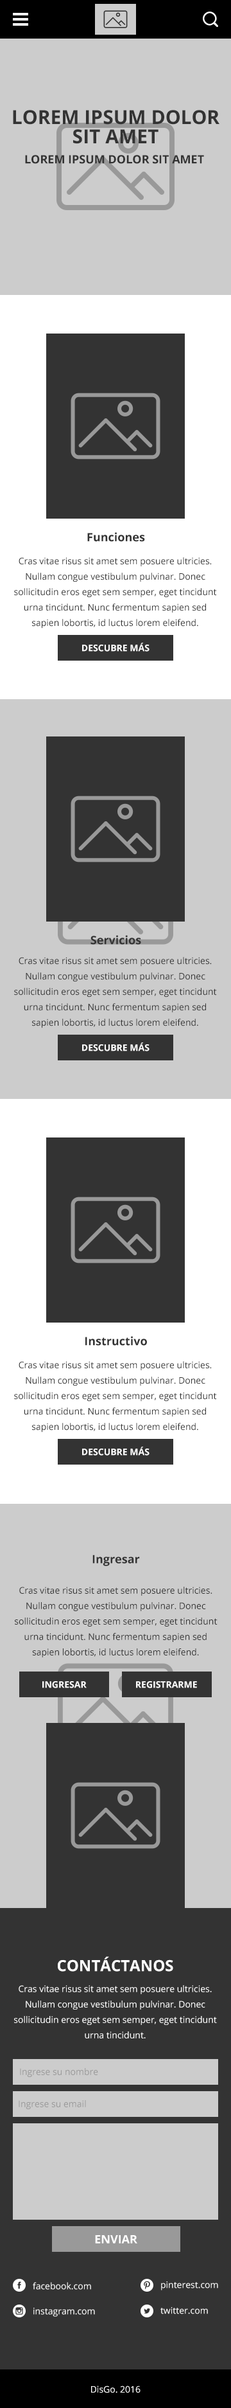
<style>
.page{position:relative;width:231px;height:2408px;background:#cccccc}
.page>*{position:absolute;margin:0}
.t1{font:19.3px/19.3px "OpenSans-Bold";color:#333333;text-transform:uppercase}
.t2{font:11.6px "OpenSans-Bold";color:#333333;text-transform:uppercase}
.t3{font:11.6px "OpenSans-Bold";color:#333333}
.t4{font:9px/15.4px "OpenSans";color:#333333}
.t5{font:9px "OpenSans-Bold";color:#ffffff;text-transform:uppercase}
.t6{font:15.4px "OpenSans-Bold";color:#ffffff}
.t7{font:9px/15.4px "OpenSans";color:#ffffff}
.t8{font:9px "OpenSans";color:#999999}
.t9{font:11.6px "OpenSans-Bold";color:#ffffff;text-transform:uppercase}
.t10{font:9px "OpenSans";color:#ffffff}
</style>
<div class="page">
<p class="t1" style="left:13px;top:110px;width:207px;height:34px;text-align:center">Lorem ipsum dolor sit amet</p>
<p class="t2" style="left:25px;top:155px;width:179px;height:9px">Lorem ipsum dolor sit amet</p>
<p class="t3" style="left:87px;top:532px;width:58px;height:10px">Funciones</p>
<p class="t4" style="left:14px;top:557px;width:203px;height:72px;text-align:center">Cras vitae risus sit amet sem posuere ultricies. Nullam congue vestibulum pulvinar. Donec sollicitudin eros eget sem semper, eget tincidunt urna tincidunt. Nunc fermentum sapien sed sapien lobortis, id luctus lorem eleifend.</p>
<p class="t5" style="left:82px;top:643px;width:68px;height:9px">Descubre más</p>
<p class="t3" style="left:91px;top:935px;width:50px;height:10px">Servicios</p>
<p class="t4" style="left:14px;top:957px;width:203px;height:71px;text-align:center">Cras vitae risus sit amet sem posuere ultricies. Nullam congue vestibulum pulvinar. Donec sollicitudin eros eget sem semper, eget tincidunt urna tincidunt. Nunc fermentum sapien sed sapien lobortis, id luctus lorem eleifend.</p>
<p class="t5" style="left:82px;top:1043px;width:68px;height:9px">Descubre más</p>
<p class="t3" style="left:85px;top:1336px;width:62px;height:10px">Instructivo</p>
<p class="t4" style="left:14px;top:1361px;width:203px;height:72px;text-align:center">Cras vitae risus sit amet sem posuere ultricies. Nullam congue vestibulum pulvinar. Donec sollicitudin eros eget sem semper, eget tincidunt urna tincidunt. Nunc fermentum sapien sed sapien lobortis, id luctus lorem eleifend.</p>
<p class="t5" style="left:82px;top:1447px;width:68px;height:9px">Descubre más</p>
<p class="t3" style="left:93px;top:1555px;width:47px;height:11px">Ingresar</p>
<p class="t4" style="left:15px;top:1587px;width:203px;height:71px;text-align:center">Cras vitae risus sit amet sem posuere ultricies. Nullam congue vestibulum pulvinar. Donec sollicitudin eros eget sem semper, eget tincidunt urna tincidunt. Nunc fermentum sapien sed sapien lobortis, id luctus lorem eleifend.</p>
<p class="t5" style="left:42px;top:1681px;width:45px;height:8px">Ingresar</p>
<p class="t5" style="left:136px;top:1681px;width:61px;height:8px">Registrarme</p>
<p class="t6" style="left:58px;top:1957px;width:116px;height:15px">CONTÁCTANOS</p>
<p class="t7" style="left:14px;top:1985px;width:203px;height:54px;text-align:center">Cras vitae risus sit amet sem posuere ultricies. Nullam congue vestibulum pulvinar. Donec sollicitudin eros eget sem semper, eget tincidunt urna tincidunt.</p>
<p class="t8" style="left:20px;top:2068px;width:78px;height:9px">Ingrese su nombre</p>
<p class="t8" style="left:19px;top:2101px;width:67px;height:9px">Ingrese su email</p>
<p class="t9" style="left:95px;top:2235px;width:43px;height:9px">Enviar</p>
<p class="t10" style="left:33px;top:2282px;width:58px;height:8px">facebook.com</p>
<p class="t10" style="left:161px;top:2282px;width:58px;height:9px">pinterest.com</p>
<p class="t10" style="left:33px;top:2308px;width:62px;height:9px">instagram.com</p>
<p class="t10" style="left:161px;top:2307px;width:47px;height:8px">twitter.com</p>
<p class="t10" style="left:91px;top:2386px;width:50px;height:8px">DisGo. 2016</p>
</div>
